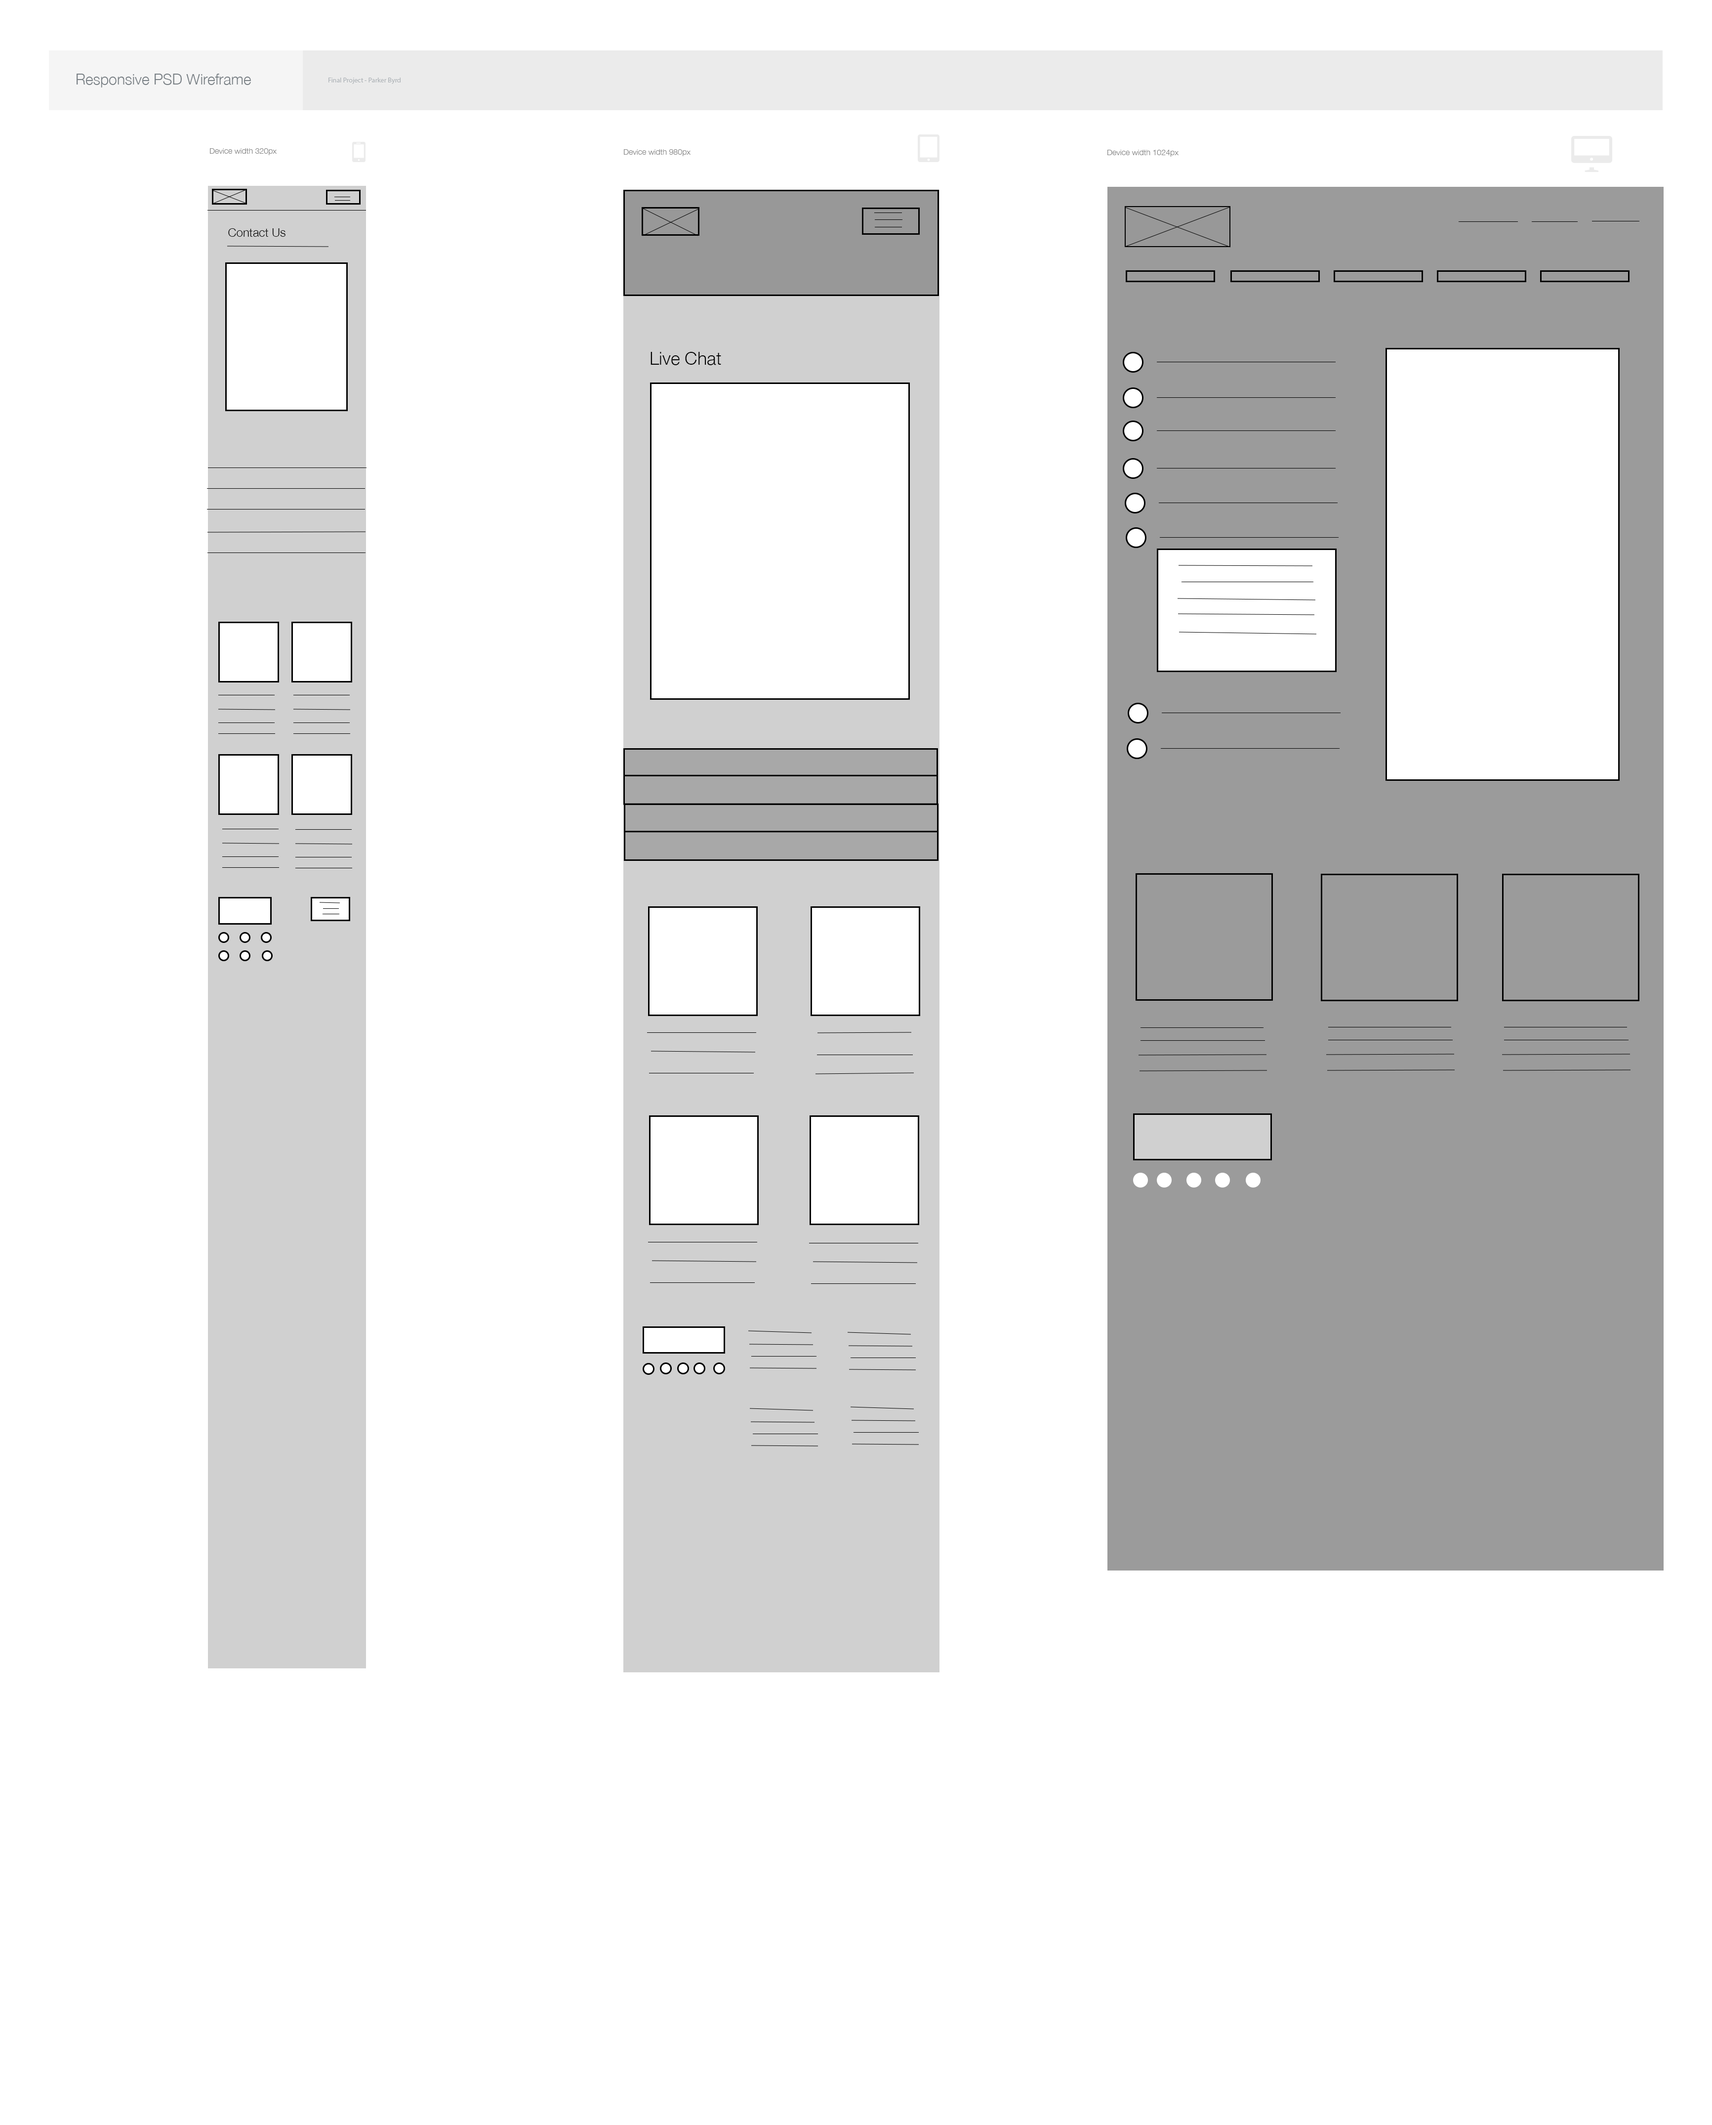
<style>
.page{position:relative;width:1712px;height:2125px;background:#ffffff}
.page>*{position:absolute;margin:0}
.t1{font:14.8px "HelveticaNeue-Light";color:#787f84}
.t2{font:6.9px "MyriadPro-Regular";color:#afb4b8}
.t3{font:7.9px "HelveticaNeue-Light";color:#878787}
.t4{font:11.9px "HelveticaNeue-Light";color:#030303}
.t5{font:17.8px "HelveticaNeue-Light";color:#030303}
</style>
<div class="page">
<p class="t1" style="left:77px;top:74px;width:174px;height:13px">Responsive PSD Wireframe</p>
<p class="t2" style="left:329px;top:78px;width:72px;height:6px">Final Project - Parker Byrd</p>
<p class="t3" style="left:210px;top:148px;width:67px;height:7px">Device width 320px</p>
<p class="t3" style="left:624px;top:149px;width:67px;height:7px">Device width 980px</p>
<p class="t3" style="left:1108px;top:150px;width:71px;height:7px">Device width 1024px</p>
<p class="t4" style="left:228px;top:228px;width:58px;height:9px">Contact Us</p>
<p class="t5" style="left:651px;top:352px;width:70px;height:13px">Live Chat</p>
</div>
